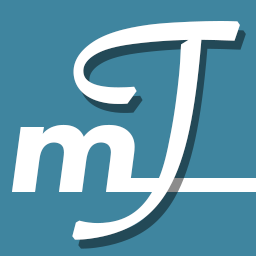
<style>
.page{position:relative;width:256px;height:256px;background:#3f859f}
.page>*{position:absolute;margin:0}
.t1{font:296.3px "SavoyeLetPlain";color:#ffffff;font-weight:bold}
.t2{font:144.8px "FuturaPT-HeavyObl";color:#ffffff;scale:1.11 1}
</style>
<div class="page">
<p class="t1" style="left:72px;top:21px;width:168px;height:219px;rotate:-8deg">T</p>
<p class="t2" style="left:12px;top:124px;width:123px;height:68px">m</p>
</div>
